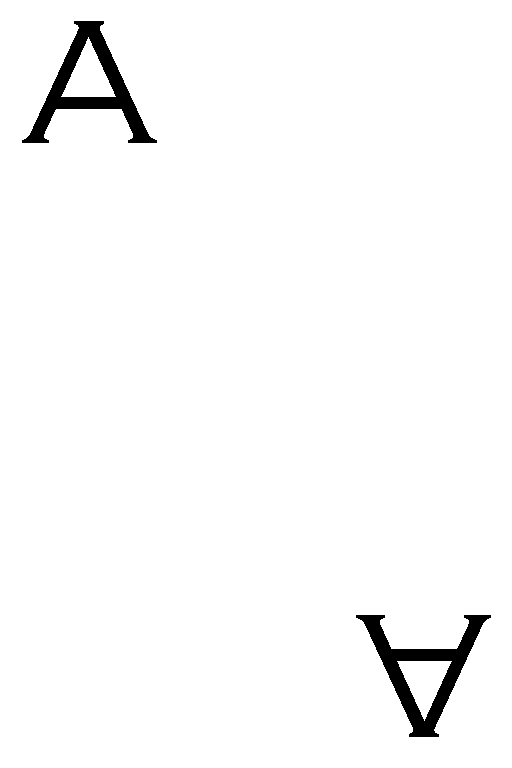
<style>
.page{position:relative;width:512px;height:768px;background:#ffffff}
.page>*{position:absolute;margin:0}
.t1{font:183.1px "CopperplateGothic-Light";color:#000000}
</style>
<div class="page">
<p class="t1" style="left:22px;top:21px;width:135px;height:122px">A</p>
<p class="t1" style="left:356px;top:615px;width:135px;height:122px;rotate:180deg">A</p>
</div>
